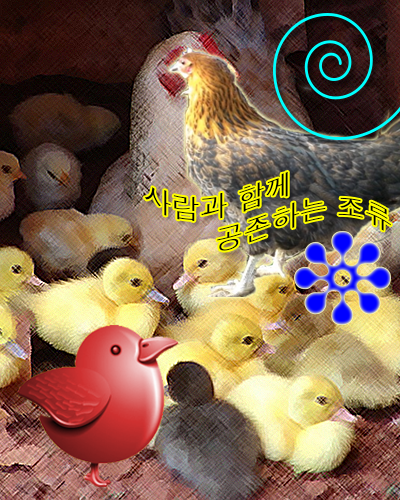
<style>
.page{position:relative;width:400px;height:500px}
.page>*{position:absolute;margin:0}
.t1{font:28px "Dotum";color:#000000}
</style>
<div class="page">
<p class="t1" style="left:144px;top:171px;width:247px;height:80px">사람과 함께<br>  공존하는 조류</p>
</div>
